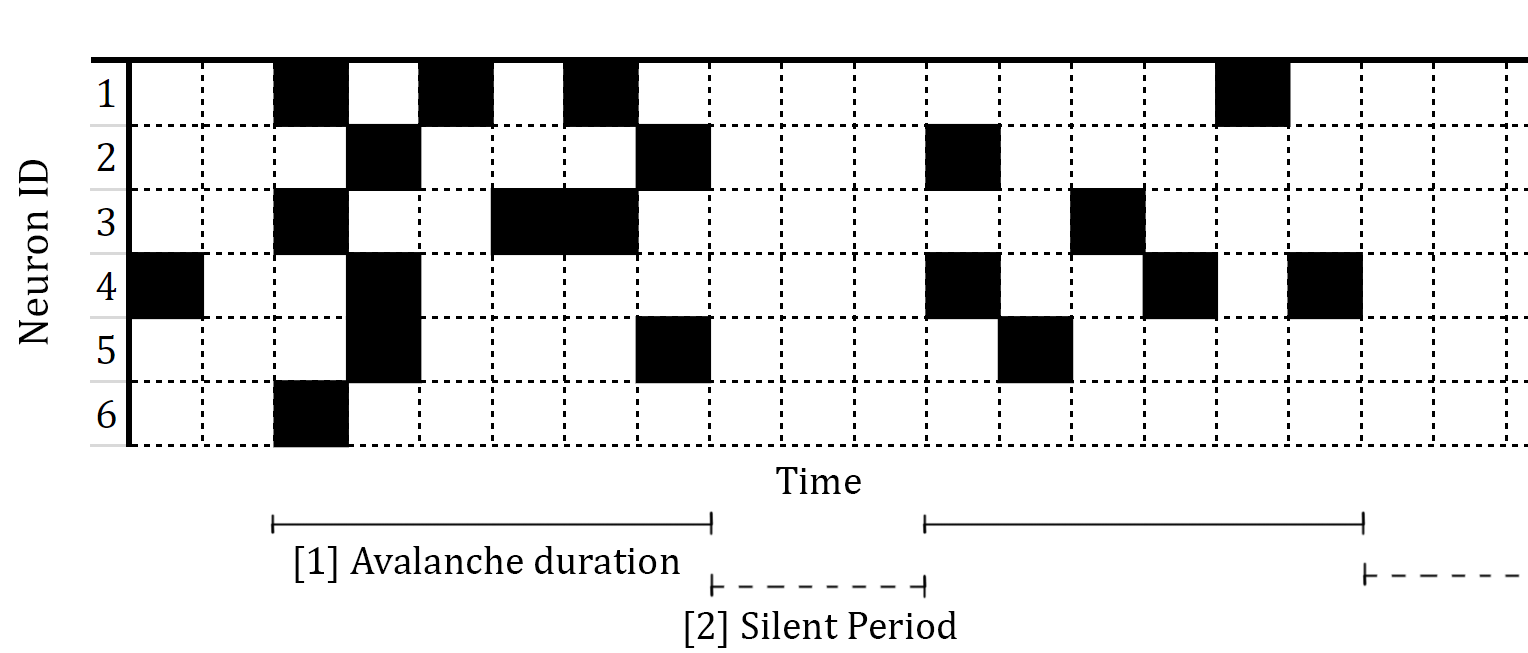
<style>
.page{position:relative;width:1528px;height:653px;background:#ffffff}
.page>*{position:absolute;margin:0}
.t1{font:43px "CambriaMath";color:#000000}
.t2{font:40px "CambriaMath";color:#000000}
</style>
<div class="page">
<p class="t1" style="left:19px;top:160px;width:29px;height:185px;rotate:-90deg">Neuron ID</p>
<p class="t2" style="left:776px;top:467px;width:85px;height:27px">Time</p>
<p class="t2" style="left:295px;top:546px;width:385px;height:37px">[1] Avalanche duration</p>
<p class="t2" style="left:685px;top:611px;width:272px;height:37px">[2] Silent Period</p>
</div>
